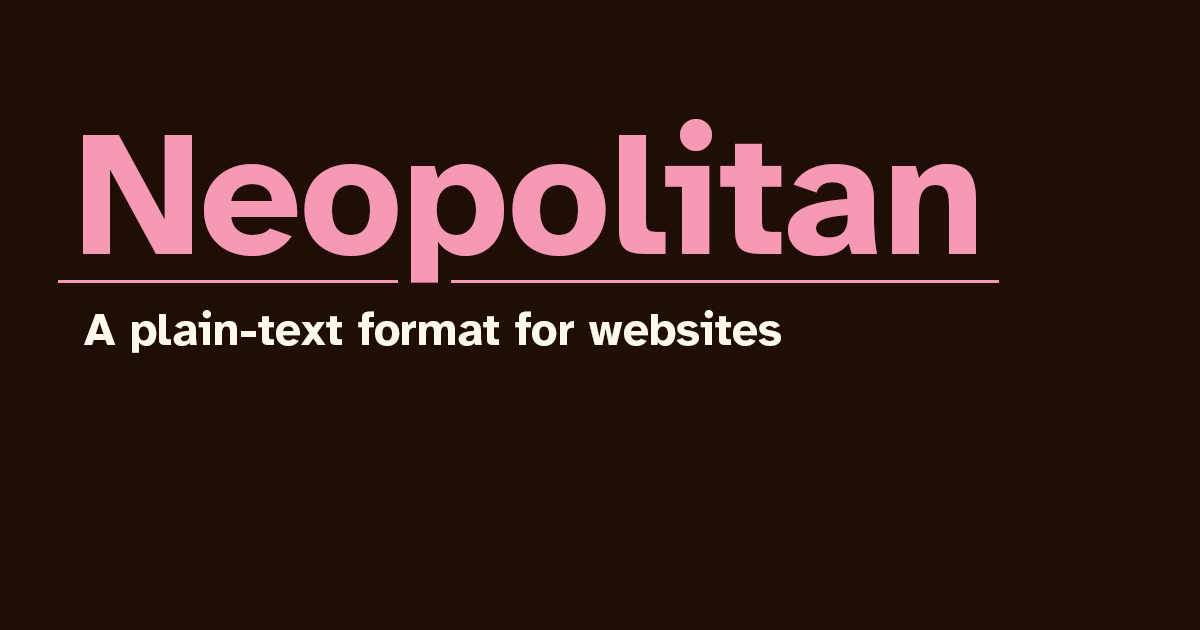
<style>
.page{position:relative;width:1200px;height:630px;background:#200d08}
.page>*{position:absolute;margin:0}
.t1{font:178px "AtkinsonHyperlegible-Bold";color:#f699b3}
.t2{font:46px "AtkinsonHyperlegible-Bold";color:#fef8ea}
</style>
<div class="page">
<p class="t1" style="left:83px;top:119px;width:893px;height:164px">Neopolitan</p>
<p class="t2" style="left:84px;top:310px;width:697px;height:43px">A plain-text format for websites</p>
</div>
